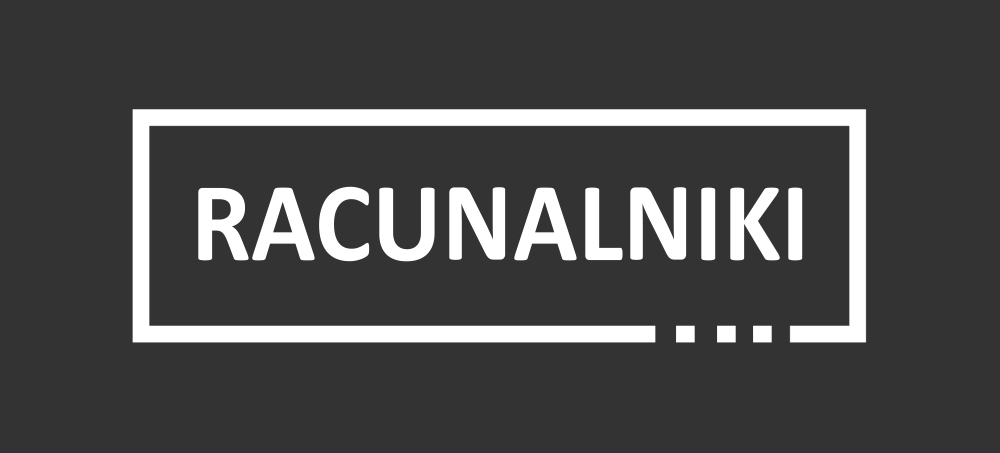
<style>
.page{position:relative;width:1000px;height:453px;background:#333333}
.page>*{position:absolute;margin:0}
.t1{font:114.2px "Calibri-Bold";color:#ffffff;scale:0.94 1}
</style>
<div class="page">
<p class="t1" style="left:198px;top:186px;width:605px;height:76px">RACUNALNIKI</p>
</div>
